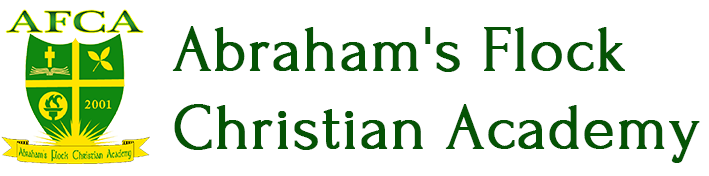
<style>
.page{position:relative;width:709px;height:176px;background:#ffffff}
.page>*{position:absolute;margin:0}
.t1{font:65px "Forum";color:#055305;font-weight:bold}
</style>
<div class="page">
<p class="t1" style="left:172px;top:26px;width:528px;height:137px">Abraham's Flock <br>Christian Academy</p>
</div>
